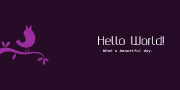
<style>
.page{position:relative;width:180px;height:90px;background:#270c27}
.page>*{position:absolute;margin:0}
.t1{font:11px "Gputeks-Regular";color:#ffffff}
.t2{font:4px "SourceCodePro-SemiboldIt"}
</style>
<div class="page">
<p class="t1" style="left:98px;top:36px;width:66px;height:9px">Hello World!</p>
<p class="t2" style="left:102px;top:49px;width:51px;height:4px">What a beautiful day.</p>
</div>
